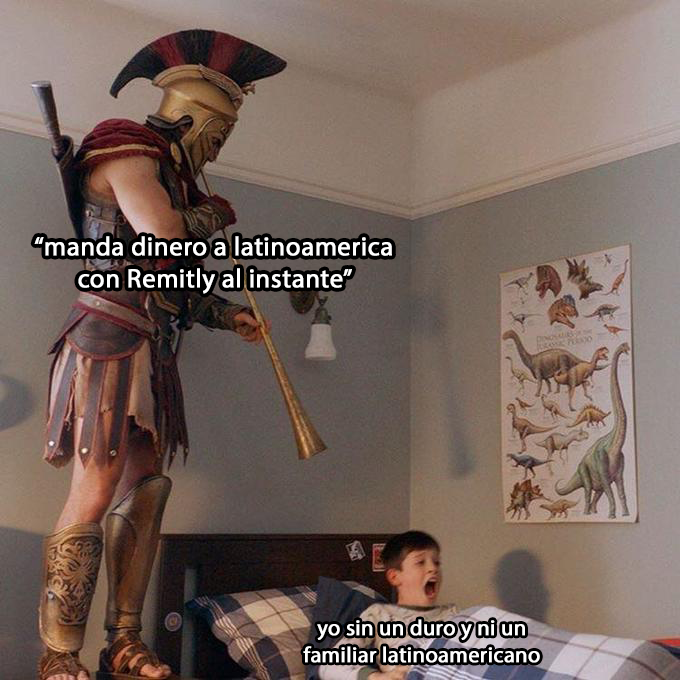
<style>
.page{position:relative;width:680px;height:680px}
.page>*{position:absolute;margin:0}
.t1{font:26.5px "MyriadPro-Regular";color:#ffffff;font-weight:bold}
.t2{font:22px "MyriadPro-Regular";color:#ffffff;font-weight:bold}
</style>
<div class="page">
<p class="t1" style="left:34px;top:236px;width:358px;height:58px;text-align:center">“manda dinero a latinoamerica<br>con Remitly al instante”</p>
<p class="t2" style="left:303px;top:619px;width:237px;height:44px;text-align:center">yo sin un duro y ni un<br>familiar latinoamericano</p>
</div>
